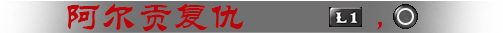
<style>
.page{position:relative;width:503px;height:33px;background:#707070}
.page>*{position:absolute;margin:0}
.t1{font:36px "STLiti";color:#ba060b}
</style>
<div class="page">
<p class="t1" style="left:67px;top:3px;width:315px;height:28px">阿尔贡复仇        ，</p>
</div>
